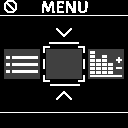
<style>
.page{position:relative;width:128px;height:128px;background:#000000}
.page>*{position:absolute;margin:0}
.t1{font:18px "AlegreyaSans-Bold";color:#ffffff}
</style>
<div class="page">
<p class="t1" style="left:41px;top:1px;width:47px;height:13px">MENU</p>
</div>
